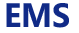
<style>
.page{position:relative;width:79px;height:33px;background:#ffffff}
.page>*{position:absolute;margin:0}
.t1{font:33.8px "Ebrima-Bold";color:#102a87;scale:0.96 1}
</style>
<div class="page">
<p class="t1" style="left:6px;top:3px;width:63px;height:25px">EMS</p>
</div>
